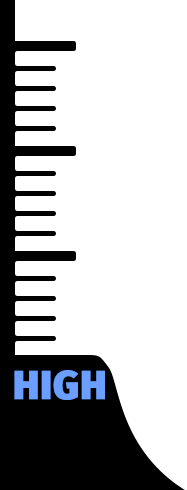
<style>
.page{position:relative;width:187px;height:490px;background:#ffffff}
.page>*{position:absolute;margin:0}
.t1{font:40px "FiraSans-Black";color:#6b9fff;font-weight:bold}
</style>
<div class="page">
<p class="t1" style="left:14px;top:370px;width:91px;height:30px">HIGH</p>
</div>
